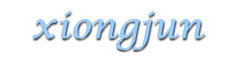
<style>
.page{position:relative;width:240px;height:60px;background:#ffffff}
.page>*{position:absolute;margin:0}
.t1{font:35px "LucidaCalligraphy-Italic";color:#99ccff;font-weight:bold}
</style>
<div class="page">
<p class="t1" style="left:32px;top:10px;width:173px;height:40px">xiongjun</p>
</div>
